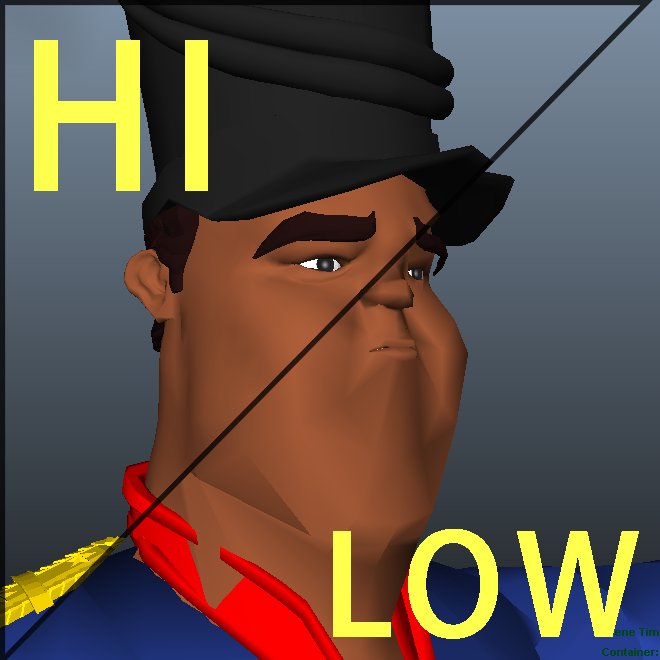
<style>
.page{position:relative;width:660px;height:660px}
.page>*{position:absolute;margin:0}
.t1{font:194.3px "AdobeFanHeitiStd-Bold";color:#ffff4d;text-transform:uppercase;font-weight:bold}
.t2{font:136.7px "AdobeFanHeitiStd-Bold";color:#ffff4d;text-transform:uppercase;font-weight:bold}
</style>
<div class="page">
<p class="t1" style="left:34px;top:40px;width:174px;height:151px">HI</p>
<p class="t2" style="left:333px;top:529px;width:306px;height:110px">LOW</p>
</div>
